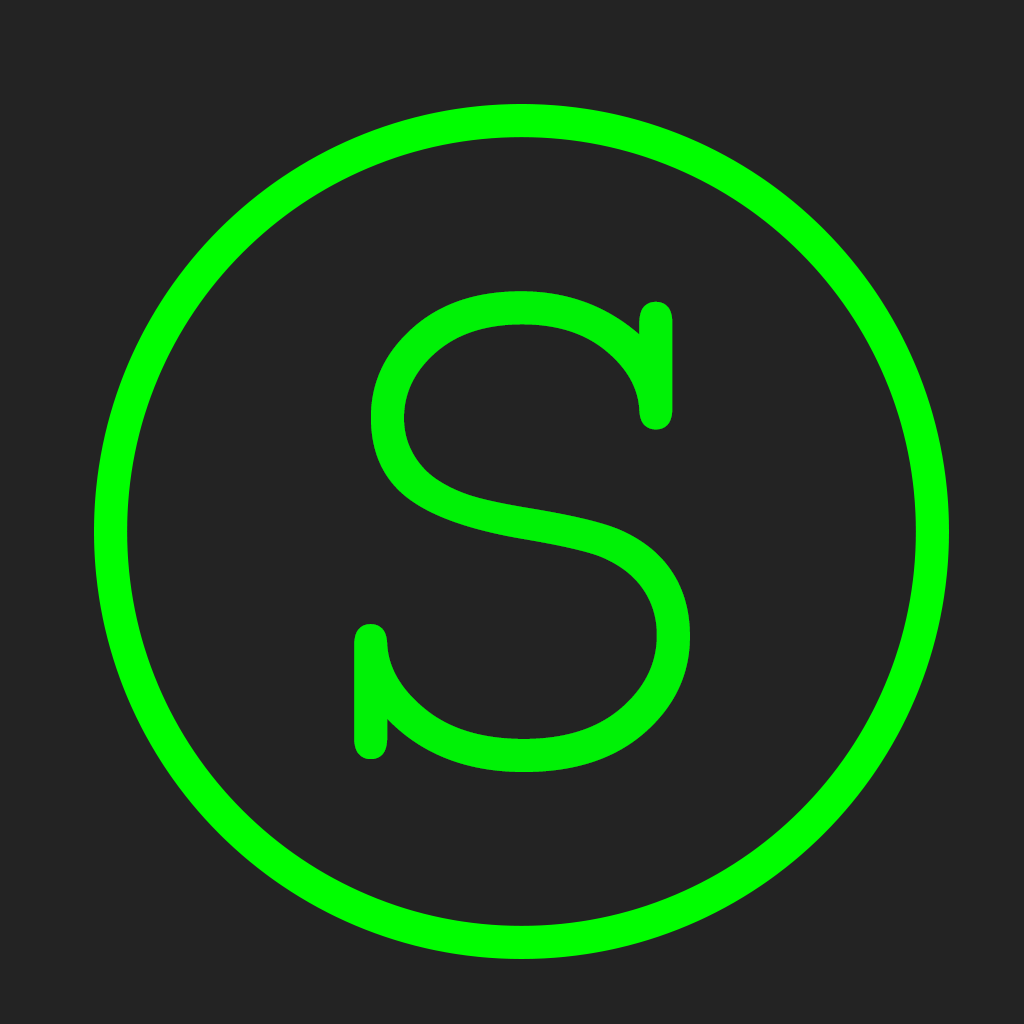
<style>
.page{position:relative;width:1024px;height:1024px;background:#232323}
.page>*{position:absolute;margin:0}
.t1{font:800px "CourierNewPSMT";color:#00f206}
</style>
<div class="page">
<p class="t1" style="left:354px;top:291px;width:336px;height:481px">S</p>
</div>
